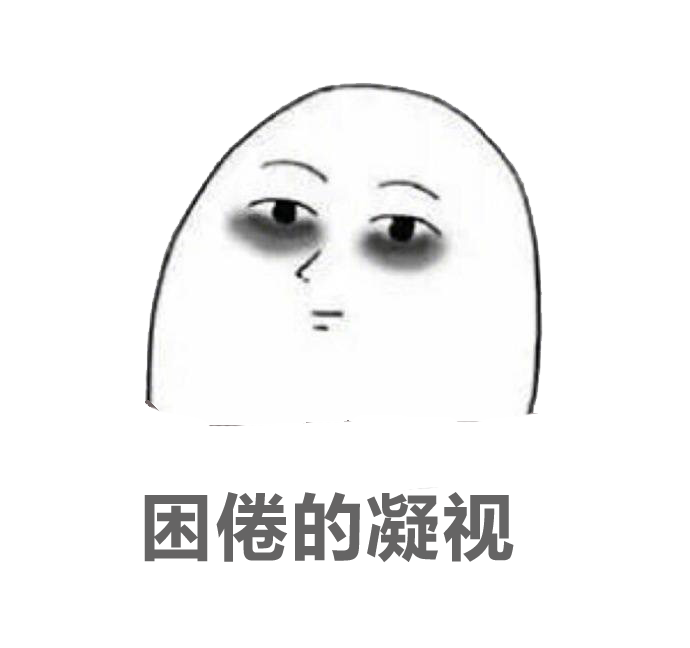
<style>
.page{position:relative;width:690px;height:648px;background:#ffffff}
.page>*{position:absolute;margin:0}
.t1{font:72px "MicrosoftYaHei-Bold";letter-spacing:0.05em;color:#656464}
</style>
<div class="page">
<p class="t1" style="left:144px;top:492px;width:370px;height:71px">困倦的凝视</p>
</div>
